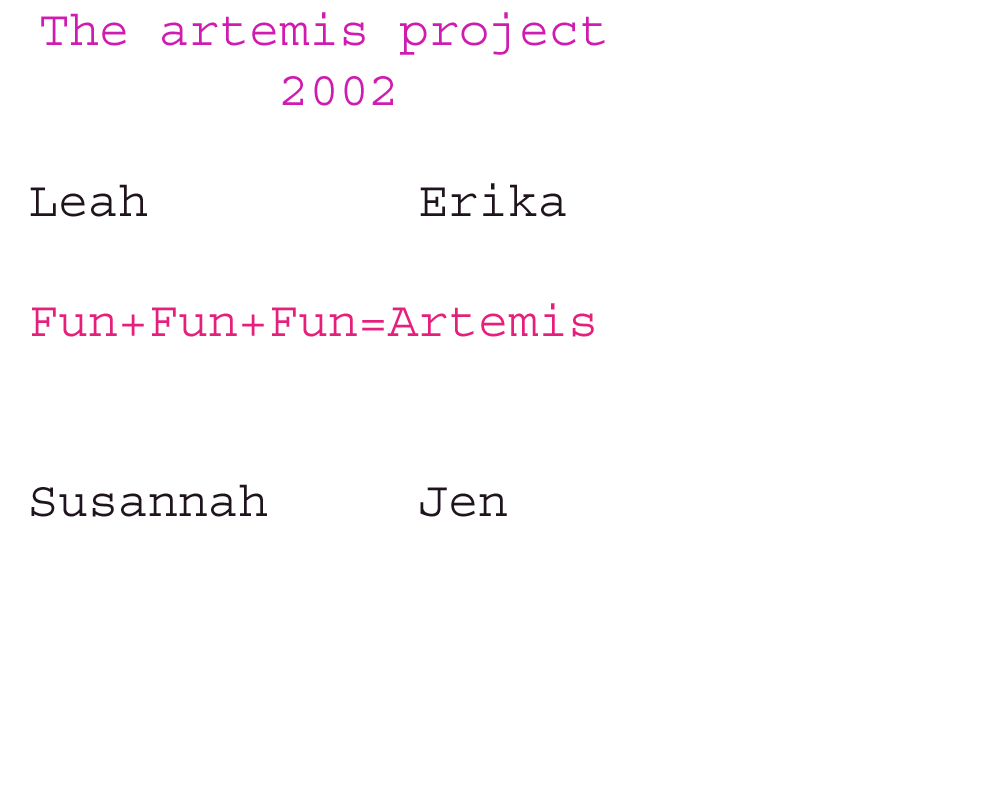
<style>
.page{position:relative;width:1000px;height:800px;background:#ffffff}
.page>*{position:absolute;margin:0}
.t1{font:50px "Courier";color:#d01bb0}
.t2{font:50px "Courier";color:#120410}
.t3{font:50px "Courier";color:#e4207c}
.t4{font:50px "Courier";color:#1f131d}
</style>
<div class="page">
<p class="t1" style="left:41px;top:12px;width:564px;height:94px"><span class="t2"><br></span>The artemis project<br>        2002</p>
<p class="t3" style="left:30px;top:183px;width:564px;height:334px"><span class="t4">Leah         Erika<br><br></span>Fun+Fun+Fun=Artemis<br><span class="t4"><br><br>Susannah     Jen</span></p>
</div>
